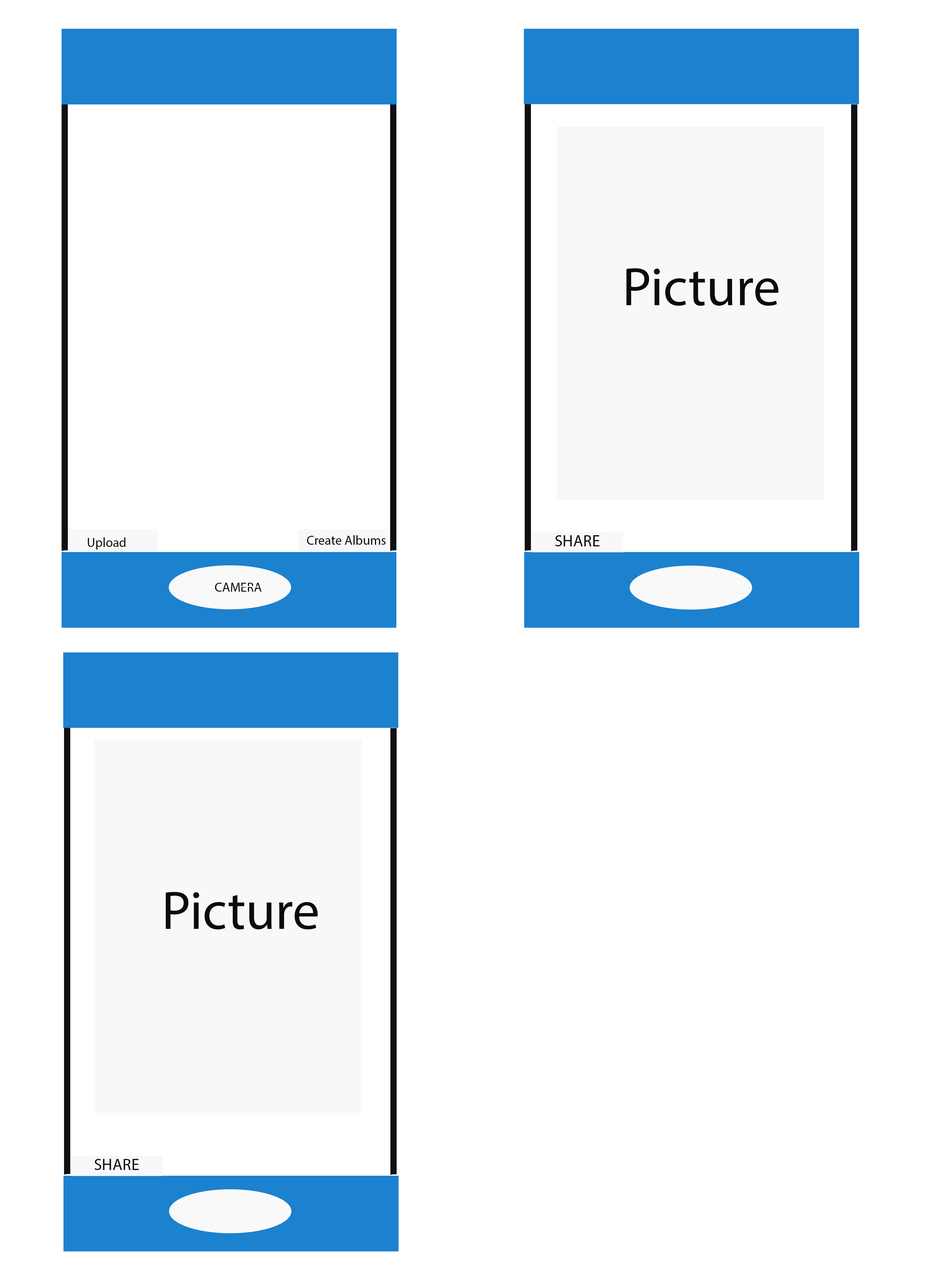
<style>
.page{position:relative;width:936px;height:1275px;background:#ffffff}
.page>*{position:absolute;margin:0}
.t1{font:54.2px "MyriadPro-Regular";color:#0b0b0c}
.t2{font:13px "MyriadPro-Regular";color:#0b0b0c}
.t3{font:16.3px "MyriadPro-Regular";color:#0b0b0c}
</style>
<div class="page">
<p class="t1" style="left:626px;top:268px;width:152px;height:38px">Picture</p>
<p class="t2" style="left:88px;top:537px;width:38px;height:12px">Upload</p>
<p class="t2" style="left:307px;top:535px;width:78px;height:10px">Create Albums</p>
<p class="t3" style="left:555px;top:535px;width:44px;height:11px">SHARE</p>
<p class="t2" style="left:215px;top:582px;width:46px;height:9px">CAMERA</p>
<p class="t1" style="left:166px;top:892px;width:152px;height:37px">Picture</p>
<p class="t3" style="left:95px;top:1158px;width:44px;height:12px">SHARE</p>
</div>
